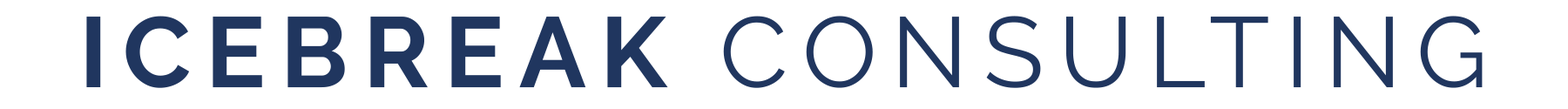
<style>
.page{position:relative;width:1568px;height:109px;background:#ffffff}
.page>*{position:absolute;margin:0}
.t1{font:99.4px "Raleway-Regular";letter-spacing:0.15em;color:#20365f}
.t2{font:99.4px "Raleway-Bold";letter-spacing:0.15em;color:#20365f}
</style>
<div class="page">
<p class="t1" style="left:86px;top:16px;width:1397px;height:72px"><span class="t2">ICEBREAK </span>CONSULTING</p>
</div>
